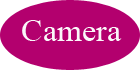
<style>
.page{position:relative;width:140px;height:70px;background:#b3006e}
.page>*{position:absolute;margin:0}
.t1{font:32px "TimesNewRomanPSMT";color:#faf7f9}
</style>
<div class="page">
<p class="t1" style="left:22px;top:20px;width:100px;height:21px">Camera</p>
</div>
